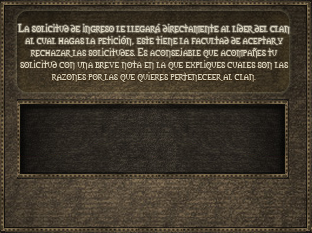
<style>
.page{position:relative;width:312px;height:233px}
.page>*{position:absolute;margin:0}
.t1{font:10px "Morpheus";color:#d8d2bd}
</style>
<div class="page">
<p class="t1" style="left:18px;top:24px;width:272px;height:58px;text-align:center">La solicitud de ingreso le llegará directamente al líder del clan <br>al cual hagas la petición, este tiene la facultad de aceptar y rechazar las solicitudes. Es aconsejable que acompañes tu solicitud con una breve nota en la que expliques cuales son las razones por las que quieres perteneceer al clan.</p>
</div>
